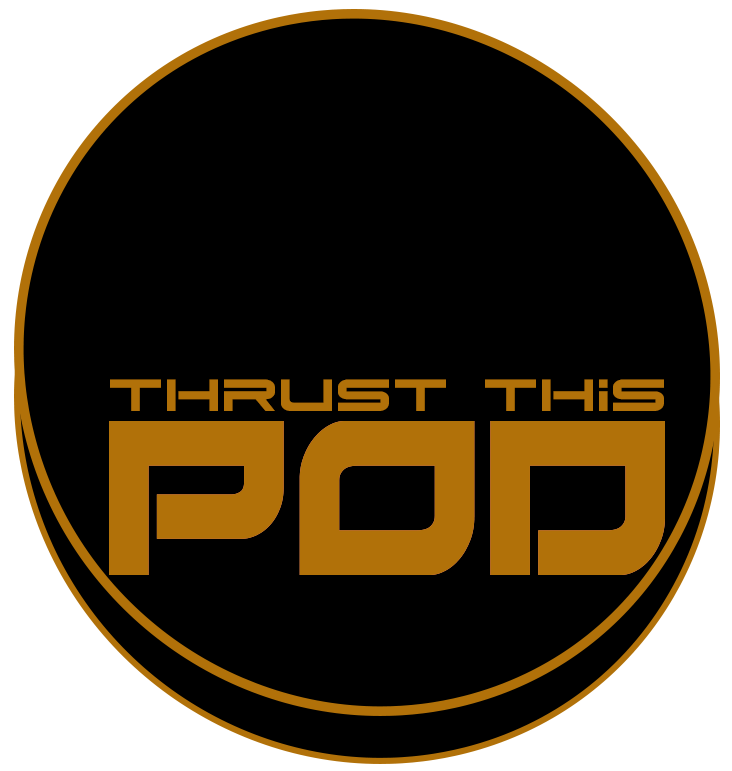
<style>
.page{position:relative;width:732px;height:771px;background:#000000}
.page>*{position:absolute;margin:0}
.t1{font:60px "Dodger";color:#b17109}
</style>
<div class="page">
<p class="t1" style="left:110px;top:379px;width:554px;height:32px">THRUSt THIS</p>
</div>
